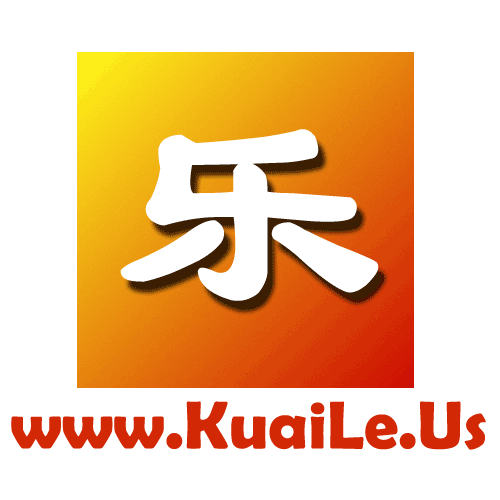
<style>
.page{position:relative;width:500px;height:500px;background:#ffffff}
.page>*{position:absolute;margin:0}
.t1{font:68px "BerlinSansFBDemi-Bold";color:#d32805}
</style>
<div class="page">
<p class="t1" style="left:11px;top:401px;width:475px;height:49px">www.KuaiLe.Us</p>
</div>
